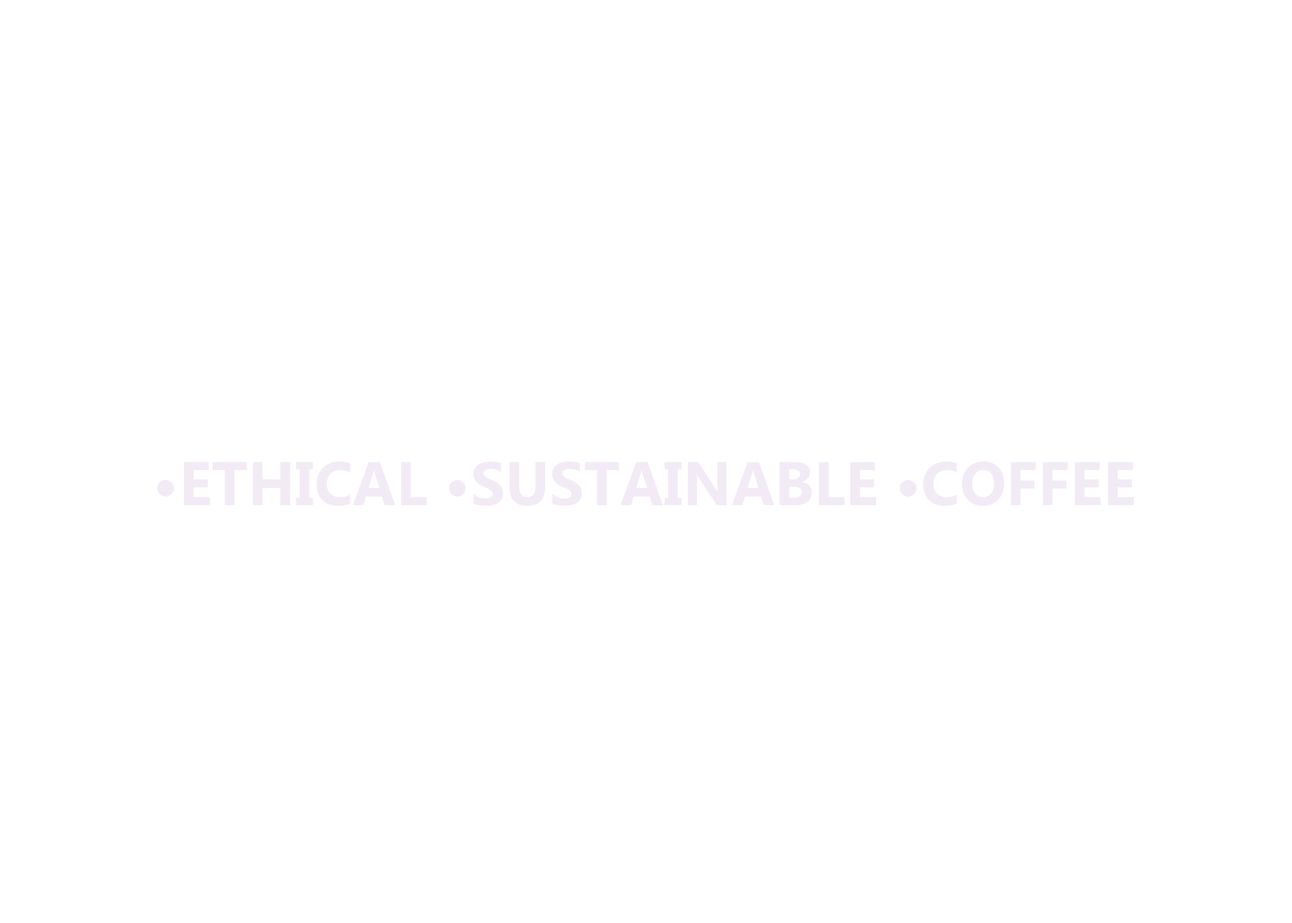
<style>
.page{position:relative;width:1292px;height:923px;background:#ffffff}
.page>*{position:absolute;margin:0}
.t1{font:61.5px "MicrosoftNewTaiLue-Bold";color:#f2ebf6}
</style>
<div class="page">
<p class="t1" style="left:157px;top:461px;width:977px;height:45px">•ETHICAL •SUSTAINABLE •COFFEE</p>
</div>
